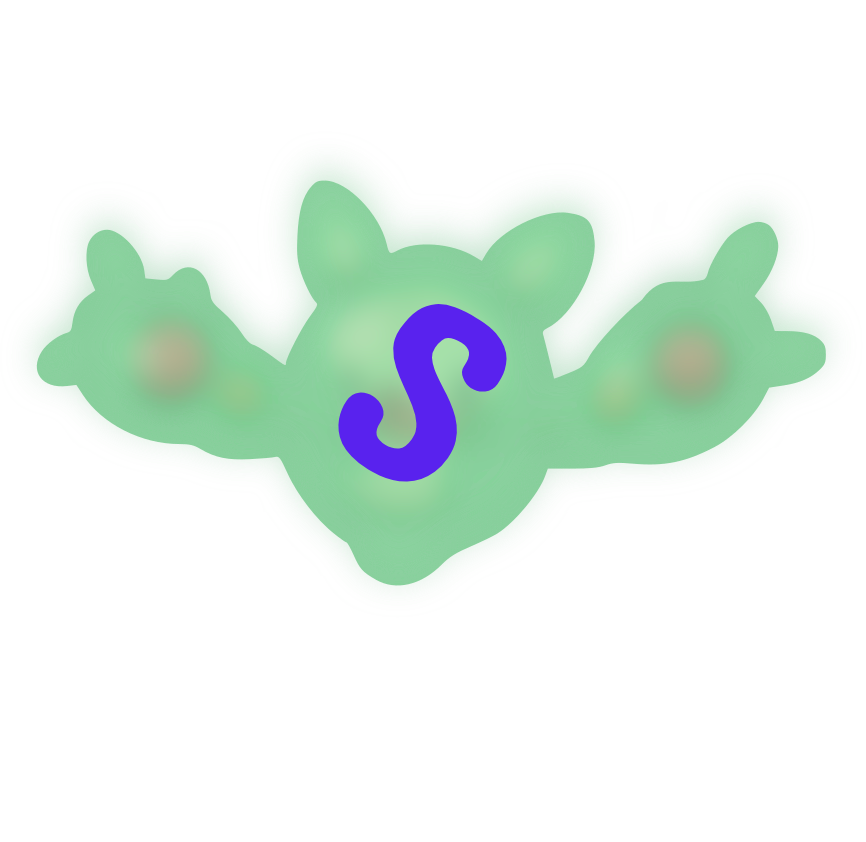
<style>
.page{position:relative;width:866px;height:842px;background:#ffffff}
.page>*{position:absolute;margin:0}
.t1{font:269.3px "Dangrek-Regular";color:#5922ee}
</style>
<div class="page">
<p class="t1" style="left:338px;top:304px;width:169px;height:178px;rotate:32deg">S</p>
</div>
